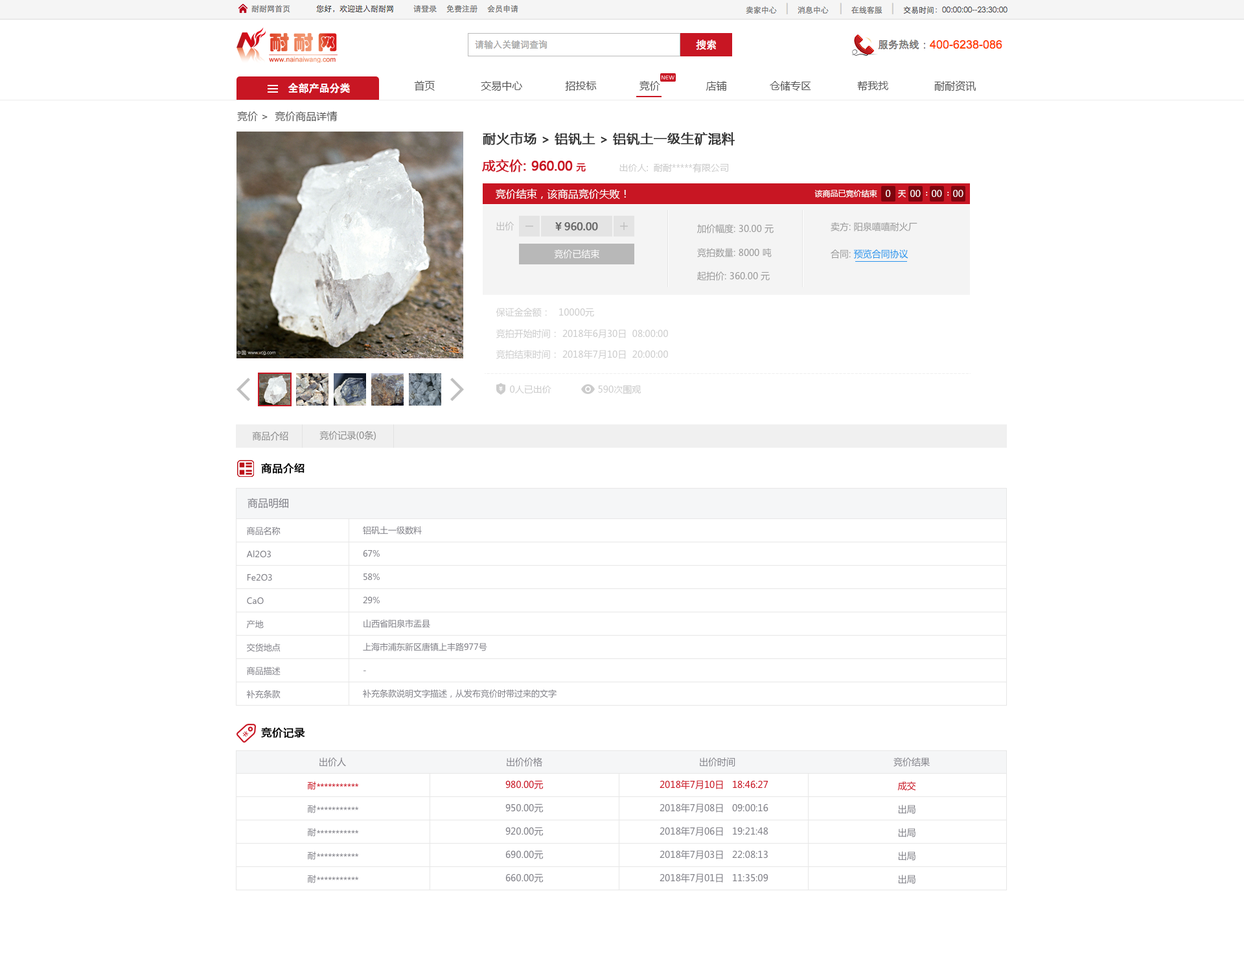
<style>
.page{position:relative;width:1244px;height:959px;background:#ffffff}
.page>*{position:absolute;margin:0}
.t1{font:10.4px "MicrosoftYaHei";color:#535353}
.t2{font:13px "MicrosoftYaHei";color:#333333;font-weight:bold}
.t3{font:11.7px "MicrosoftYaHei";color:#333333;font-weight:bold}
.t4{font:13px "MicrosoftYaHei";letter-spacing:-0.05em;color:#c81623;font-weight:bold}
.t5{font:13px "MicrosoftYaHei";color:#c81623;font-weight:bold}
.t6{font:9.1px "MicrosoftYaHei";color:#c81623;font-weight:bold}
.t7{font:9.1px "MicrosoftYaHei";color:#cccccc}
.t8{font:10.4px "MicrosoftYaHei";color:#ffffff}
.t9{font:7.8px "MicrosoftYaHei";color:#ffffff}
.t10{font:9.1px "MicrosoftYaHei";color:#ffffff}
.t11{font:9.1px "MicrosoftYaHei";color:#bbbbbb}
.t12{font:10.4px "MicrosoftYaHei";letter-spacing:-0.05em;color:#666666;font-weight:bold}
.t13{font:10.4px "MicrosoftYaHei";color:#666666;font-weight:bold}
.t14{font:9.1px "MicrosoftYaHei";color:#999999}
.t15{font:9.1px "MicrosoftYaHei";color:#2c94ed}
.t16{font:9.1px "MicrosoftYaHei";color:#898989}
.t17{font:10.4px "MicrosoftYaHei";color:#000000;font-weight:bold}
.t18{font:10.4px "MicrosoftYaHei";color:#808087}
.t19{font:8.4px "MicrosoftYaHei";color:#808087}
.t20{font:8.4px "MicrosoftYaHei"}
.t21{font:9.1px "MicrosoftYaHei";color:#808087}
.t22{font:8.4px "MicrosoftYaHei";color:#c81623}
.t23{font:9.1px "MicrosoftYaHei";color:#c81623}
</style>
<div class="page">
<p class="t1" style="left:414px;top:80px;width:562px;height:11px">首页               交易中心              招投标              竞价               店铺              仓储专区               帮我找               耐耐资讯</p>
<p class="t1" style="left:237px;top:111px;width:100px;height:11px">竞价 &gt;  竞价商品详情</p>
<p class="t2" style="left:483px;top:132px;width:252px;height:14px">耐火市场<span class="t3"> &gt; </span>铝钒土<span class="t3"> &gt; </span>铝钒土一级生矿混料</p>
<p class="t4" style="left:482px;top:159px;width:104px;height:13px"><span class="t5">成交价: </span>960.00 <span class="t6">元</span></p>
<p class="t7" style="left:619px;top:163px;width:110px;height:10px">出价人:  耐耐*****有限公司</p>
<p class="t8" style="left:496px;top:189px;width:130px;height:11px">竞价结束，该商品竞价失败！</p>
<p class="t9" style="left:814px;top:189px;width:63px;height:9px">该商品已竞价结束</p>
<p class="t10" style="left:886px;top:190px;width:5px;height:7px">0</p>
<p class="t9" style="left:898px;top:190px;width:8px;height:8px">天</p>
<p class="t10" style="left:910px;top:190px;width:11px;height:7px">00</p>
<p class="t9" style="left:926px;top:192px;width:2px;height:4px">：</p>
<p class="t10" style="left:932px;top:190px;width:10px;height:7px">00</p>
<p class="t9" style="left:947px;top:192px;width:2px;height:4px">：</p>
<p class="t10" style="left:953px;top:190px;width:10px;height:7px">00</p>
<p class="t11" style="left:496px;top:222px;width:18px;height:9px">出价</p>
<p class="t12" style="left:555px;top:222px;width:43px;height:9px"><span class="t13">￥</span>960.00</p>
<p class="t14" style="left:697px;top:224px;width:76px;height:9px">加价幅度: 30.00 元</p>
<p class="t14" style="left:830px;top:222px;width:87px;height:9px">卖方: 阳泉嘻嘻耐火厂</p>
<p class="t10" style="left:554px;top:249px;width:45px;height:9px">竞价已结束</p>
<p class="t14" style="left:697px;top:248px;width:75px;height:9px">竞拍数量: 8000 吨</p>
<p class="t15" style="left:830px;top:249px;width:78px;height:9px"><span class="t14">合同: </span>预览合同协议</p>
<p class="t14" style="left:697px;top:271px;width:73px;height:9px">起拍价: 360.00 元</p>
<p class="t7" style="left:496px;top:308px;width:98px;height:9px">保证金金额：   10000元</p>
<p class="t7" style="left:496px;top:329px;width:172px;height:9px">竞拍开始时间： 2018年6月30日  08:00:00</p>
<p class="t7" style="left:496px;top:350px;width:172px;height:9px">竞拍结束时间： 2018年7月10日  20:00:00</p>
<p class="t7" style="left:510px;top:385px;width:41px;height:8px">0人已出价</p>
<p class="t7" style="left:598px;top:385px;width:43px;height:10px">590次围观</p>
<p class="t16" style="left:252px;top:431px;width:36px;height:9px">商品介绍</p>
<p class="t16" style="left:319px;top:431px;width:57px;height:9px">竞价记录(0条)</p>
<p class="t17" style="left:261px;top:463px;width:43px;height:11px">商品介绍</p>
<p class="t18" style="left:247px;top:498px;width:41px;height:11px">商品明细</p>
<p class="t19" style="left:247px;top:527px;width:33px;height:8px">商品名称</p>
<p class="t19" style="left:363px;top:526px;width:59px;height:8px">铝矾土一级数料</p>
<p class="t19" style="left:246px;top:550px;width:25px;height:8px">Al2O3</p>
<p class="t19" style="left:363px;top:549px;width:17px;height:8px">67%</p>
<p class="t19" style="left:247px;top:573px;width:25px;height:8px">Fe2O3</p>
<p class="t19" style="left:363px;top:573px;width:17px;height:7px">58%</p>
<p class="t19" style="left:247px;top:597px;width:17px;height:7px">CaO</p>
<p class="t19" style="left:363px;top:596px;width:17px;height:8px">29%</p>
<p class="t19" style="left:246px;top:620px;width:18px;height:8px">产地</p>
<p class="t19" style="left:363px;top:619px;width:67px;height:9px">山西省阳泉市盂县</p>
<p class="t19" style="left:247px;top:643px;width:33px;height:9px">交货地点</p>
<p class="t19" style="left:363px;top:643px;width:124px;height:8px">上海市浦东新区唐镇上丰路977号</p>
<p class="t19" style="left:247px;top:667px;width:33px;height:8px">商品描述</p>
<p class="t20" style="left:363px;top:670px;width:3px;height:1px">-</p>
<p class="t19" style="left:246px;top:690px;width:34px;height:8px">补充条款</p>
<p class="t19" style="left:363px;top:689px;width:193px;height:9px">补充条款说明文字描述，从发布竞价时带过来的文字</p>
<p class="t17" style="left:261px;top:727px;width:44px;height:11px">竞价记录</p>
<p class="t21" style="left:319px;top:757px;width:27px;height:9px">出价人</p>
<p class="t21" style="left:507px;top:757px;width:35px;height:9px">出价价格</p>
<p class="t21" style="left:700px;top:757px;width:35px;height:9px">出价时间</p>
<p class="t21" style="left:893px;top:757px;width:37px;height:9px">竞价结果</p>
<p class="t22" style="left:308px;top:781px;width:8px;height:9px">耐</p>
<p class="t20" style="left:317px;top:783px;width:41px;height:3px">***********</p>
<p class="t23" style="left:505px;top:780px;width:38px;height:9px">980.00元</p>
<p class="t23" style="left:659px;top:780px;width:109px;height:9px">2018年7月10日   18:46:27</p>
<p class="t23" style="left:897px;top:781px;width:19px;height:9px">成交</p>
<p class="t19" style="left:308px;top:805px;width:8px;height:8px">耐</p>
<p class="t19" style="left:317px;top:807px;width:41px;height:3px">***********</p>
<p class="t21" style="left:505px;top:803px;width:38px;height:9px">950.00元</p>
<p class="t21" style="left:659px;top:803px;width:109px;height:9px">2018年7月08日   09:00:16</p>
<p class="t21" style="left:898px;top:805px;width:17px;height:9px">出局</p>
<p class="t19" style="left:308px;top:828px;width:8px;height:8px">耐</p>
<p class="t19" style="left:317px;top:830px;width:41px;height:3px">***********</p>
<p class="t21" style="left:505px;top:827px;width:38px;height:9px">920.00元</p>
<p class="t21" style="left:659px;top:827px;width:109px;height:9px">2018年7月06日   19:21:48</p>
<p class="t21" style="left:898px;top:828px;width:17px;height:9px">出局</p>
<p class="t19" style="left:308px;top:851px;width:8px;height:9px">耐</p>
<p class="t19" style="left:317px;top:853px;width:41px;height:3px">***********</p>
<p class="t21" style="left:505px;top:850px;width:38px;height:9px">690.00元</p>
<p class="t21" style="left:659px;top:850px;width:109px;height:9px">2018年7月03日   22:08:13</p>
<p class="t21" style="left:898px;top:851px;width:17px;height:9px">出局</p>
<p class="t19" style="left:308px;top:875px;width:8px;height:8px">耐</p>
<p class="t19" style="left:317px;top:876px;width:41px;height:4px">***********</p>
<p class="t21" style="left:505px;top:873px;width:38px;height:9px">660.00元</p>
<p class="t21" style="left:659px;top:873px;width:109px;height:9px">2018年7月01日   11:35:09</p>
<p class="t21" style="left:898px;top:875px;width:17px;height:9px">出局</p>
</div>
